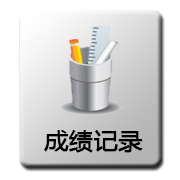
<style>
.page{position:relative;width:180px;height:180px;background:#ffffff}
.page>*{position:absolute;margin:0}
.t1{font:24px "MicrosoftYaHei";color:#000000;font-weight:bold}
</style>
<div class="page">
<p class="t1" style="left:44px;top:130px;width:99px;height:23px">成绩记录</p>
</div>
